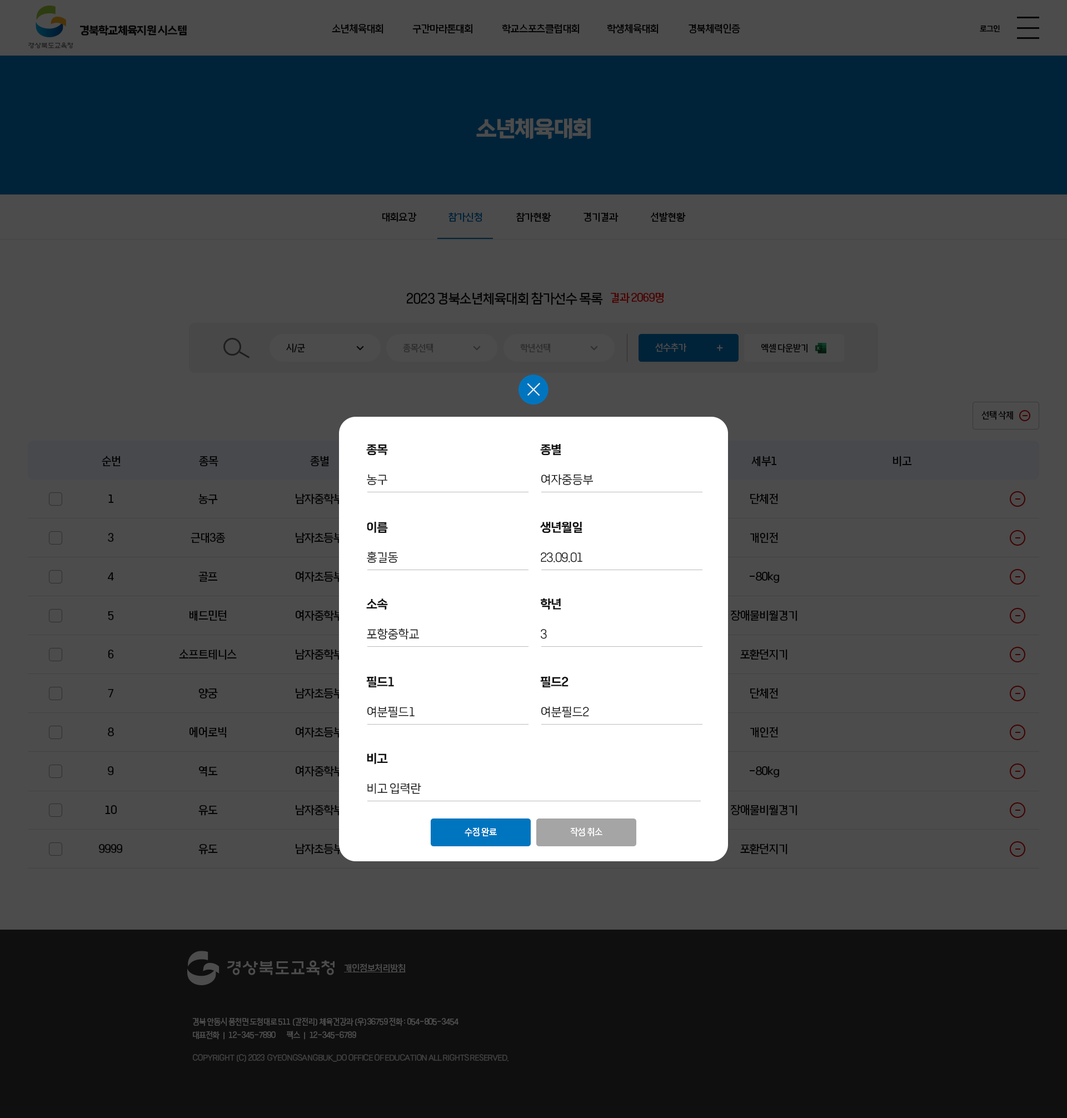
<style>
.page{position:relative;width:1067px;height:1118px;background:#4c4c4c}
.page>*{position:absolute;margin:0}
.t1{font:11.1px "TheJamsilOTF5Bold";letter-spacing:-0.05em;color:#111111}
.t2{font:10px "TheJamsilOTF3Regular";letter-spacing:-0.05em;color:#111111}
.t3{font:7.8px "TheJamsilOTF4Medium";letter-spacing:-0.05em;color:#111111}
.t4{font:22.2px "TheJamsilOTF5Bold";letter-spacing:-0.05em;color:#4c4c4c}
.t5{font:10px "TheJamsilOTF3Regular";letter-spacing:-0.05em;color:#002339}
.t6{font:13.3px "TheJamsilOTF3Regular";letter-spacing:-0.05em;color:#111111}
.t7{font:11.1px "TheJamsilOTF3Regular";letter-spacing:-0.05em;color:#4c0000}
.t8{font:8.9px "TheJamsilOTF3Regular";letter-spacing:-0.05em;color:#111111}
.t9{font:8.9px "TheJamsilOTF3Regular";letter-spacing:-0.05em;color:#2e2e2e}
.t10{font:8.9px "TheJamsilOTF3Regular";letter-spacing:-0.05em;color:#4c4c4c}
.t11{font:11.1px "TheJamsilOTF3Regular";letter-spacing:-0.05em;color:#4c4c4c}
.t12{font:12.2px "TheJamsilOTF4Medium";letter-spacing:-0.05em;color:#111111}
.t13{font:11.1px "TheJamsilOTF3Regular";letter-spacing:-0.05em;color:#111111}
.t14{font:12.2px "TheJamsilOTF2Light";letter-spacing:-0.05em;color:#111111}
.t15{font:11.1px/38.9px "TheJamsilOTF3Regular";letter-spacing:-0.05em;color:#111111}
.t16{font:8.9px "TheJamsilOTF3Regular";letter-spacing:-0.05em;color:#ffffff}
.t17{font:8.9px "TheJamsilOTF3Regular";letter-spacing:-0.05em;color:#4c4c4c;text-decoration:underline}
.t18{font:7.8px "TheJamsilOTF3Regular";letter-spacing:-0.05em;color:#4c4c4c}
.t19{font:7.8px "TheJamsilOTF3Regular";letter-spacing:-0.05em;color:#3e3e3e}
</style>
<div class="page">
<p class="t1" style="left:80px;top:25px;width:107px;height:11px">경북학교체육지원 시스템</p>
<p class="t2" style="left:332px;top:24px;width:51px;height:10px">소년체육대회</p>
<p class="t2" style="left:412px;top:24px;width:60px;height:10px">구간마라톤대회</p>
<p class="t2" style="left:502px;top:24px;width:77px;height:10px">학교스포츠클럽대회</p>
<p class="t2" style="left:607px;top:24px;width:51px;height:10px">학생체육대회</p>
<p class="t2" style="left:688px;top:23px;width:52px;height:11px">경북체력인증</p>
<p class="t3" style="left:980px;top:25px;width:20px;height:7px">로그인</p>
<p class="t4" style="left:476px;top:118px;width:115px;height:21px">소년체육대회</p>
<p class="t2" style="left:382px;top:212px;width:35px;height:10px">대회요강</p>
<p class="t5" style="left:448px;top:212px;width:34px;height:10px">참가신청</p>
<p class="t2" style="left:516px;top:212px;width:35px;height:10px">참가현황</p>
<p class="t2" style="left:583px;top:212px;width:35px;height:10px">경기결과</p>
<p class="t2" style="left:650px;top:212px;width:36px;height:10px">선발현황</p>
<p class="t6" style="left:407px;top:292px;width:196px;height:13px">2023 경북소년체육대회 참가선수 목록</p>
<p class="t7" style="left:611px;top:292px;width:52px;height:11px">결과 2069명</p>
<p class="t8" style="left:286px;top:343px;width:19px;height:10px">시/군</p>
<p class="t9" style="left:403px;top:343px;width:30px;height:10px">종목선택</p>
<p class="t9" style="left:520px;top:343px;width:30px;height:10px">학년선택</p>
<p class="t10" style="left:655px;top:343px;width:31px;height:9px">선수추가</p>
<p class="t11" style="left:717px;top:344px;width:6px;height:7px">+</p>
<p class="t8" style="left:761px;top:343px;width:46px;height:10px">엑셀 다운받기</p>
<p class="t8" style="left:981px;top:411px;width:32px;height:9px">선택 삭제</p>
<p class="t12" style="left:366px;top:444px;width:22px;height:12px">종목</p>
<p class="t12" style="left:540px;top:444px;width:21px;height:11px">종별</p>
<p class="t13" style="left:102px;top:456px;width:19px;height:10px">순번</p>
<p class="t13" style="left:199px;top:456px;width:19px;height:11px">종목</p>
<p class="t13" style="left:310px;top:456px;width:19px;height:10px">종별</p>
<p class="t13" style="left:751px;top:456px;width:25px;height:11px">세부1</p>
<p class="t13" style="left:893px;top:456px;width:19px;height:11px">비고</p>
<p class="t14" style="left:367px;top:474px;width:20px;height:11px">농구</p>
<p class="t14" style="left:541px;top:474px;width:52px;height:11px">여자중등부</p>
<p class="t15" style="left:99px;top:494px;width:23px;height:359px;text-align:center">1<br>3<br>4<br>5<br>6<br>7<br>8<br>9<br>10<br>9999</p>
<p class="t15" style="left:179px;top:494px;width:58px;height:360px;text-align:center">농구<br>근대3종<br>골프<br>배드민턴<br>소프트테니스<br>양궁<br>에어로빅<br>역도<br>유도<br>유도</p>
<p class="t15" style="left:730px;top:493px;width:67px;height:361px;text-align:center">단체전<br>개인전<br>-80kg<br>장애물비월경기<br>포환던지기<br>단체전<br>개인전<br>-80kg<br>장애물비월경기<br>포환던지기</p>
<p class="t12" style="left:367px;top:522px;width:21px;height:11px">이름</p>
<p class="t12" style="left:540px;top:522px;width:42px;height:11px">생년월일</p>
<p class="t14" style="left:367px;top:551px;width:31px;height:12px">홍길동</p>
<p class="t14" style="left:541px;top:552px;width:41px;height:10px">23.09.01</p>
<p class="t12" style="left:366px;top:598px;width:22px;height:12px">소속</p>
<p class="t12" style="left:541px;top:598px;width:20px;height:12px">학년</p>
<p class="t14" style="left:367px;top:628px;width:52px;height:11px">포항중학교</p>
<p class="t14" style="left:541px;top:629px;width:6px;height:10px">3</p>
<p class="t12" style="left:366px;top:676px;width:28px;height:11px">필드1</p>
<p class="t12" style="left:540px;top:676px;width:28px;height:11px">필드2</p>
<p class="t14" style="left:367px;top:706px;width:47px;height:11px">여분필드1</p>
<p class="t14" style="left:541px;top:706px;width:48px;height:11px">여분필드2</p>
<p class="t12" style="left:367px;top:753px;width:21px;height:11px">비고</p>
<p class="t14" style="left:367px;top:783px;width:54px;height:11px">비고 입력란</p>
<p class="t16" style="left:464px;top:827px;width:33px;height:10px">수정 완료</p>
<p class="t16" style="left:570px;top:827px;width:32px;height:10px">작성 취소</p>
<p class="t17" style="left:344px;top:963px;width:62px;height:10px">개인정보처리방침</p>
<p class="t18" style="left:192px;top:1017px;width:266px;height:23px">경북 안동시 풍천면 도청대로 511 (갈전리) 체육건강과 (우)36759 전화 : 054-805-3454<br>대표전화 ㅣ 12-345-7890         팩스 ㅣ 12-345-6789</p>
<p class="t19" style="left:193px;top:1054px;width:315px;height:8px">COPYRIGHT (C) 2023  GYEONGSANGBUK_DO OFFICE OF EDUCATION ALL RIGHTS RESERVED.</p>
</div>
